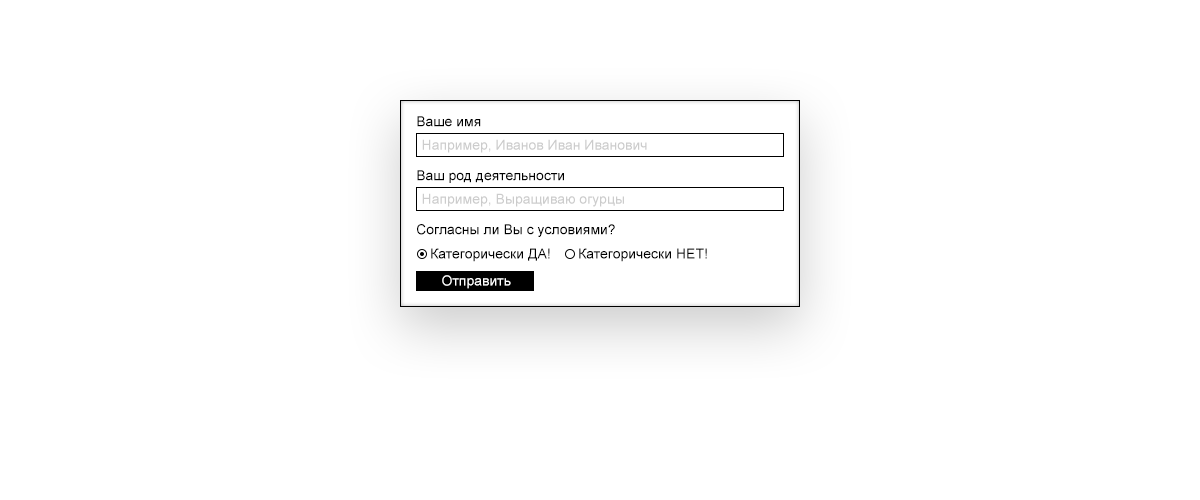
<style>
.page{position:relative;width:1200px;height:500px;background:#ffffff}
.page>*{position:absolute;margin:0}
.t1{font:14px "ArialMT";color:#000000}
.t2{font:14px "ArialMT";color:#cccccc}
.t3{font:14px "ArialMT";color:#ffffff}
</style>
<div class="page">
<p class="t1" style="left:417px;top:116px;width:64px;height:11px">Ваше имя</p>
<p class="t2" style="left:422px;top:139px;width:225px;height:14px">Например, Иванов Иван Иванович</p>
<p class="t1" style="left:417px;top:170px;width:147px;height:13px">Ваш род деятельности</p>
<p class="t2" style="left:422px;top:193px;width:202px;height:14px">Например, Выращиваю огурцы</p>
<p class="t1" style="left:417px;top:224px;width:198px;height:13px">Согласны ли Вы с условиями?</p>
<p class="t1" style="left:431px;top:248px;width:119px;height:14px">Категорически ДА!</p>
<p class="t1" style="left:579px;top:248px;width:128px;height:14px">Категорически НЕТ!</p>
<p class="t3" style="left:442px;top:275px;width:69px;height:14px">Отправить</p>
</div>
